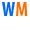
<style>
.page{position:relative;width:30px;height:30px;background:#ffffff}
.page>*{position:absolute;margin:0}
.t1{font:20px "MyriadPro-BoldCond";color:#0167ff;text-transform:uppercase}
.t2{font:20px "MyriadPro-BoldCond";color:#ff6d01;text-transform:uppercase}
</style>
<div class="page">
<p class="t1" style="left:2px;top:2px;width:26px;height:14px">W<span class="t2">M</span></p>
</div>
